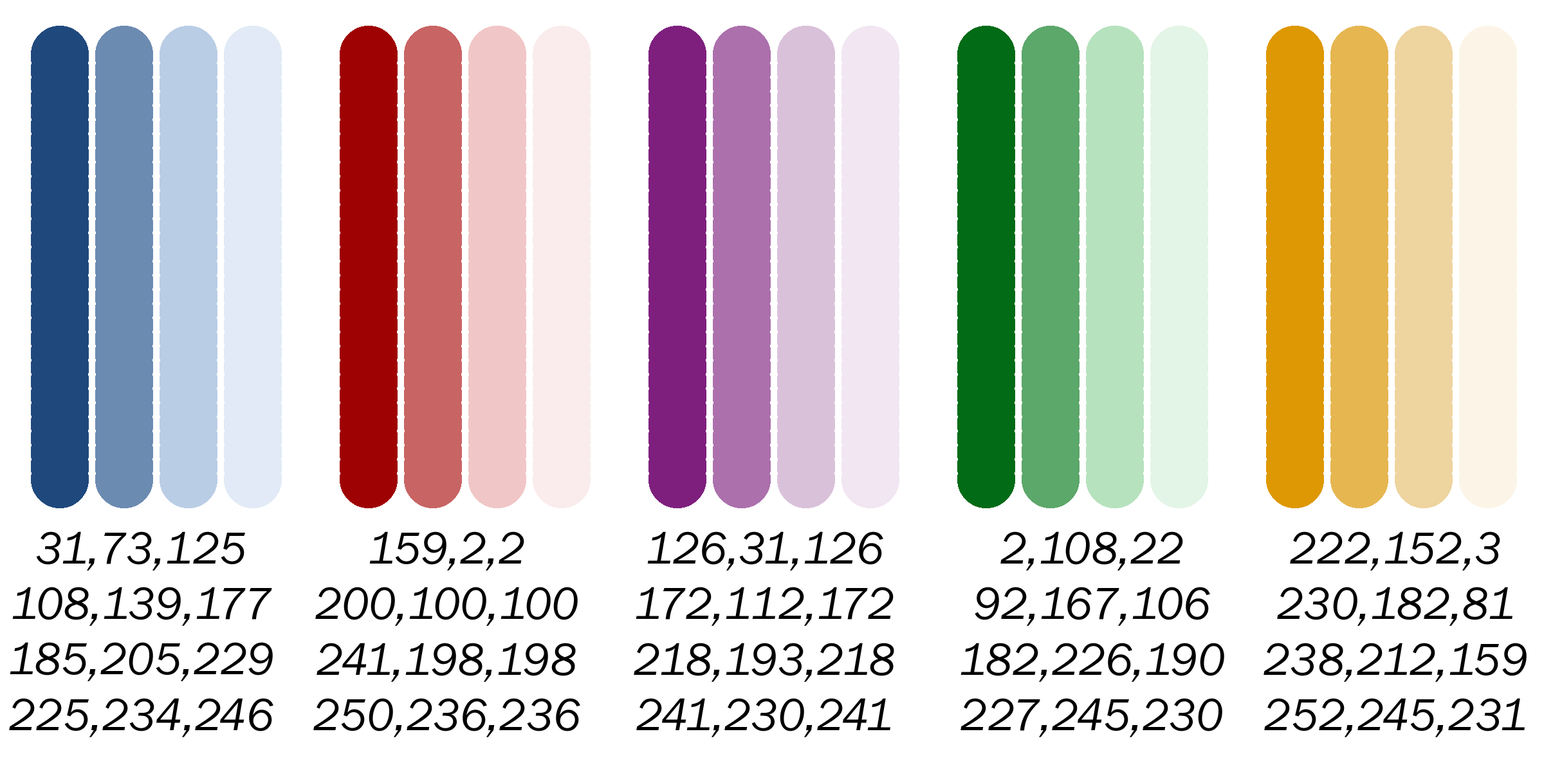
<style>
.page{position:relative;width:1544px;height:772px;background:#ffffff}
.page>*{position:absolute;margin:0}
.t1{font:46.3px "FranklinGothic-BookItalic";color:#000000}
</style>
<div class="page">
<p class="t1" style="left:9px;top:531px;width:264px;height:206px;text-align:center">31,73,125<br>108,139,177<br>185,205,229<br>225,234,246</p>
<p class="t1" style="left:313px;top:531px;width:267px;height:206px;text-align:center">159,2,2<br>200,100,100<br>241,198,198<br>250,236,236</p>
<p class="t1" style="left:634px;top:531px;width:260px;height:206px;text-align:center">126,31,126<br>172,112,172<br>218,193,218<br>241,230,241</p>
<p class="t1" style="left:961px;top:531px;width:264px;height:206px;text-align:center">2,108,22<br>92,167,106<br>182,226,190<br>227,245,230</p>
<p class="t1" style="left:1264px;top:531px;width:263px;height:206px;text-align:center">222,152,3<br>230,182,81<br>238,212,159<br>252,245,231</p>
</div>
